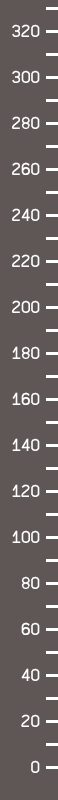
<style>
.page{position:relative;width:58px;height:800px;background:#5f5656}
.page>*{position:absolute;margin:0}
.t1{font:16px "AirbusPFD";color:#ffffff}
</style>
<div class="page">
<p class="t1" style="left:12px;top:24px;width:28px;height:13px">320</p>
<p class="t1" style="left:12px;top:70px;width:28px;height:13px">300</p>
<p class="t1" style="left:12px;top:116px;width:28px;height:13px">280</p>
<p class="t1" style="left:12px;top:162px;width:28px;height:13px">260</p>
<p class="t1" style="left:12px;top:208px;width:28px;height:13px">240</p>
<p class="t1" style="left:12px;top:254px;width:28px;height:13px">220</p>
<p class="t1" style="left:12px;top:300px;width:28px;height:13px">200</p>
<p class="t1" style="left:12px;top:346px;width:28px;height:13px">180</p>
<p class="t1" style="left:12px;top:392px;width:28px;height:13px">160</p>
<p class="t1" style="left:12px;top:438px;width:28px;height:13px">140</p>
<p class="t1" style="left:12px;top:484px;width:28px;height:13px">120</p>
<p class="t1" style="left:12px;top:530px;width:28px;height:13px">100</p>
<p class="t1" style="left:21px;top:576px;width:19px;height:13px">80</p>
<p class="t1" style="left:21px;top:622px;width:19px;height:13px">60</p>
<p class="t1" style="left:21px;top:668px;width:19px;height:13px">40</p>
<p class="t1" style="left:21px;top:714px;width:19px;height:13px">20</p>
<p class="t1" style="left:31px;top:760px;width:9px;height:13px">0</p>
</div>
